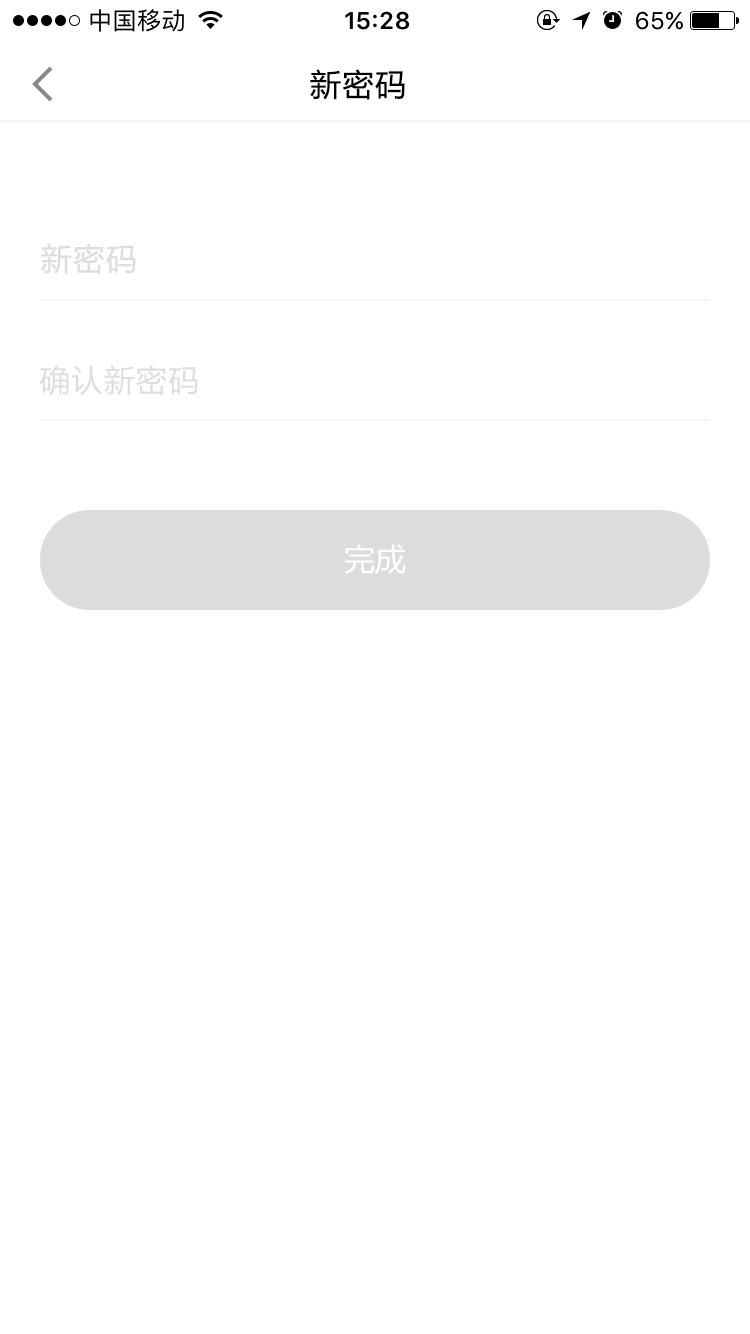
<style>
.page{position:relative;width:750px;height:1334px;background:#ffffff}
.page>*{position:absolute;margin:0}
.t1{font:31px "MicrosoftYaHei";letter-spacing:0.05em;color:#000000}
.t2{font:31px "MicrosoftYaHei";letter-spacing:0.05em;color:#dddddd}
.t3{font:30.7px "MicrosoftYaHei";letter-spacing:0.05em;color:#dddddd}
.t4{font:30.7px "MicrosoftYaHei";color:#ffffff}
</style>
<div class="page">
<p class="t1" style="left:310px;top:69px;width:95px;height:31px">新密码</p>
<p class="t2" style="left:41px;top:243px;width:95px;height:31px">新密码</p>
<p class="t3" style="left:39px;top:365px;width:159px;height:30px">确认新密码</p>
<p class="t4" style="left:344px;top:544px;width:62px;height:31px">完成</p>
</div>
